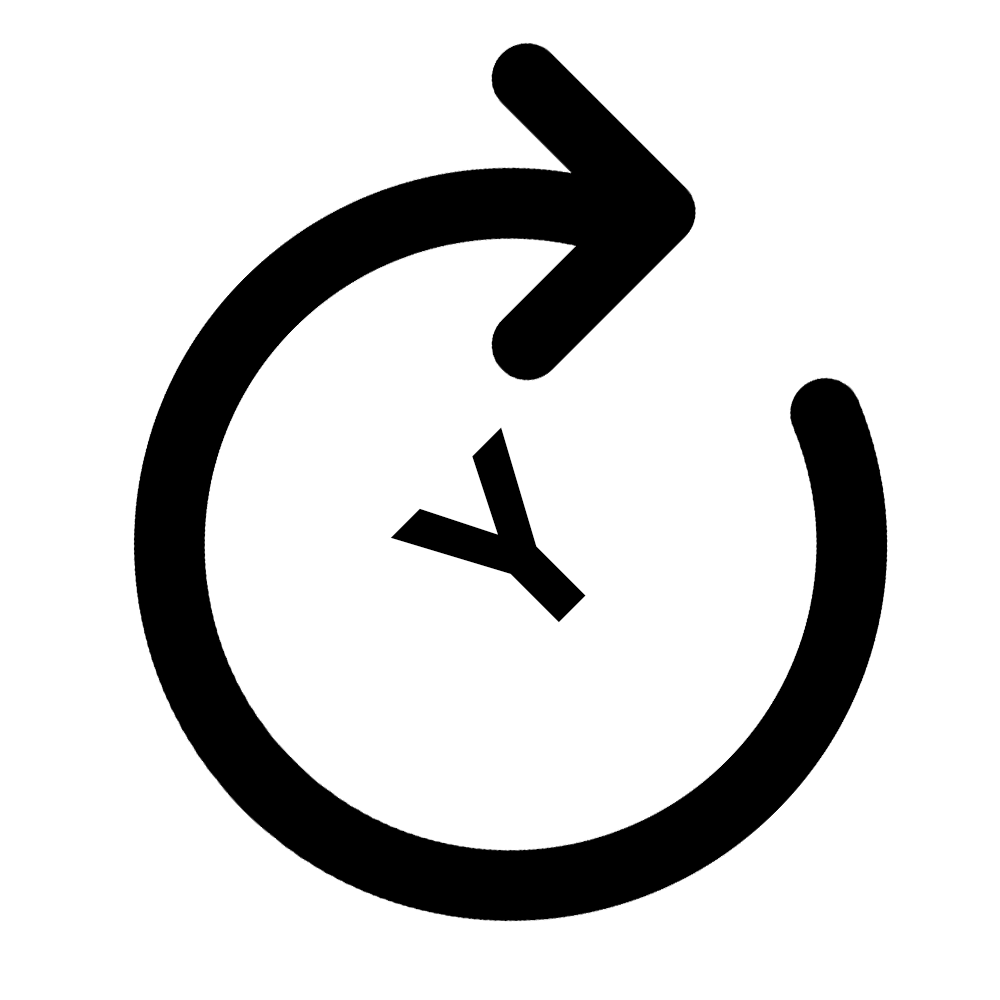
<style>
.page{position:relative;width:1000px;height:1000px;background:#ffffff}
.page>*{position:absolute;margin:0}
.t1{font:250px "OpenSans-Bold";color:#000000;text-transform:uppercase}
</style>
<div class="page">
<p class="t1" style="left:390px;top:427px;width:196px;height:196px;rotate:-45deg">Y</p>
</div>
